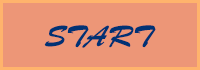
<style>
.page{position:relative;width:200px;height:70px;background:#ed9677}
.page>*{position:absolute;margin:0}
.t1{font:30px "BrushScriptStd";color:#013274;text-transform:uppercase}
</style>
<div class="page">
<p class="t1" style="left:44px;top:25px;width:112px;height:23px">start</p>
</div>
